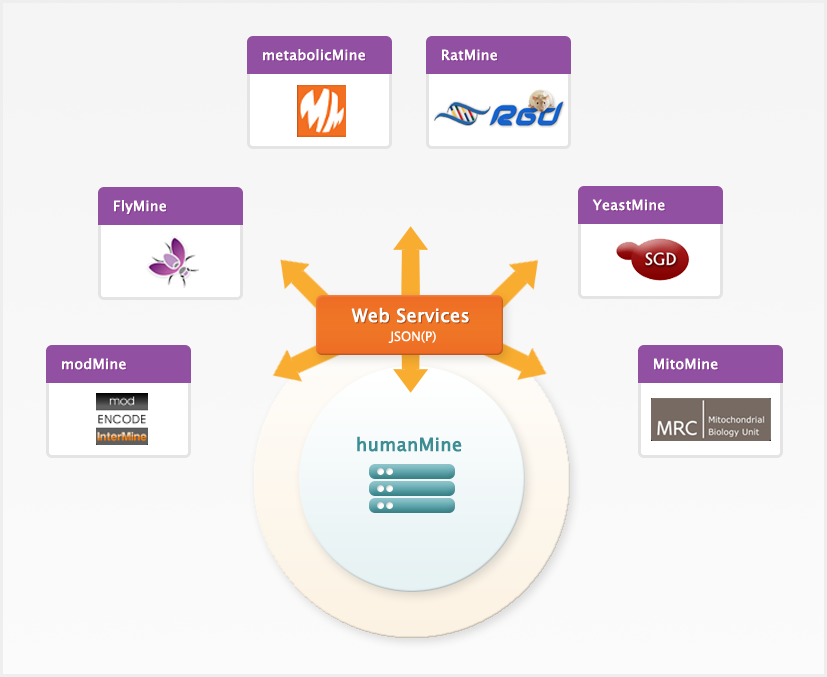
<style>
.page{position:relative;width:827px;height:677px}
.page>*{position:absolute;margin:0}
.t1{font:14px "LucidaGrande";color:#ffffff;font-weight:bold}
.t2{font:18px "LucidaGrande";color:#ffffff;font-weight:bold}
.t3{font:18px "LucidaGrande";font-weight:bold}
.t4{font:13px "LucidaGrande";color:#ffffff}
.t5{font:18px "LucidaGrande";color:#3d8d94;font-weight:bold}
</style>
<div class="page">
<p class="t1" style="left:263px;top:49px;width:102px;height:12px">metabolicMine</p>
<p class="t1" style="left:442px;top:49px;width:55px;height:12px">RatMine</p>
<p class="t1" style="left:114px;top:200px;width:52px;height:14px">FlyMine</p>
<p class="t1" style="left:592px;top:199px;width:73px;height:12px">YeastMine</p>
<p class="t2" style="left:351px;top:307px;width:118px;height:16px">Web Services</p>
<p class="t3" style="left:352px;top:308px;width:118px;height:16px">Web Services</p>
<p class="t4" style="left:388px;top:330px;width:48px;height:13px">JSON(P)</p>
<p class="t1" style="left:62px;top:358px;width:64px;height:12px">modMine</p>
<p class="t1" style="left:654px;top:358px;width:64px;height:12px">MitoMine</p>
<p class="t5" style="left:357px;top:436px;width:105px;height:16px">humanMine</p>
</div>
